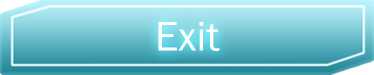
<style>
.page{position:relative;width:374px;height:75px}
.page>*{position:absolute;margin:0}
.t1{font:42.8px "FranklinGothic-Book";color:#fffefe}
</style>
<div class="page">
<p class="t1" style="left:158px;top:22px;width:62px;height:29px">Exit</p>
</div>
